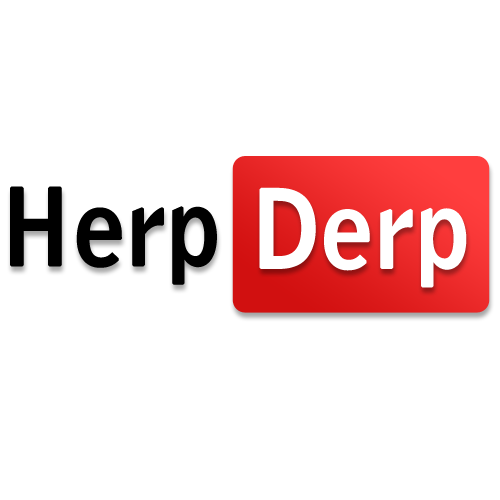
<style>
.page{position:relative;width:500px;height:500px;background:#ffffff}
.page>*{position:absolute;margin:0}
.t1{font:104.7px "BellGothicStd-Bold";letter-spacing:-0.025em;color:#000000;font-weight:bold}
.t2{font:106.3px "BellGothicStd-Bold";letter-spacing:-0.025em;color:#ffffff;font-weight:bold}
</style>
<div class="page">
<p class="t1" style="left:10px;top:186px;width:207px;height:99px">Herp</p>
<p class="t2" style="left:259px;top:187px;width:208px;height:101px">Derp</p>
</div>
